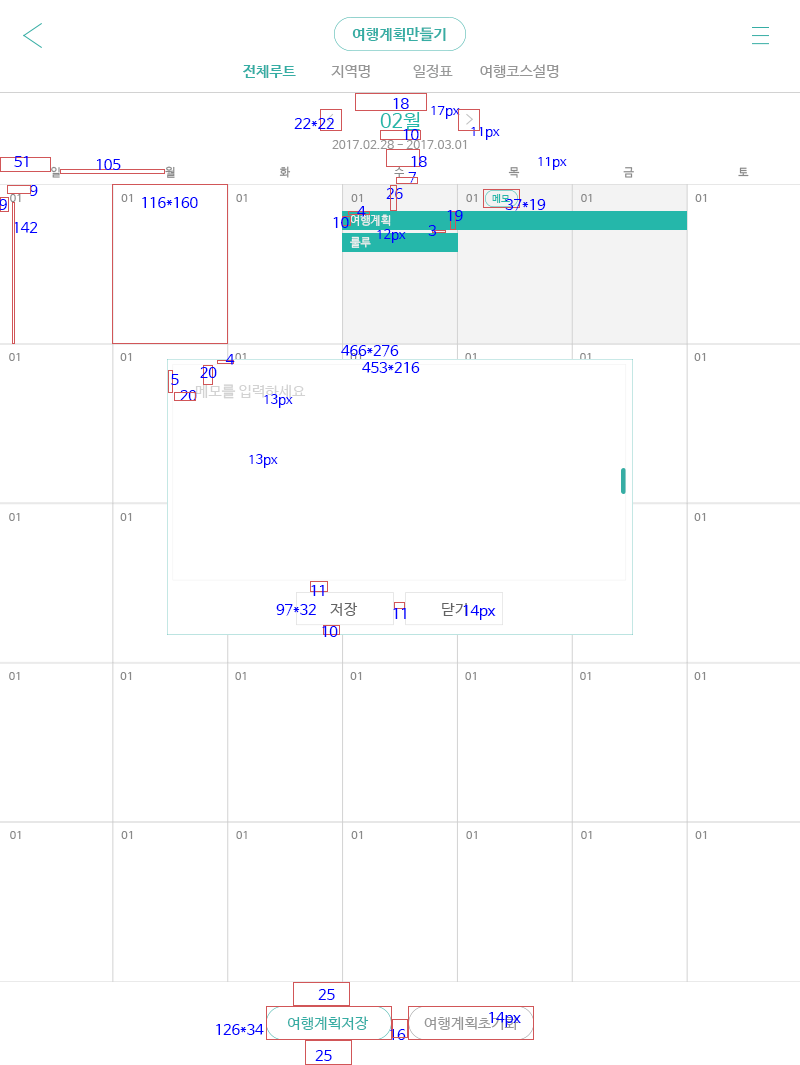
<style>
.page{position:relative;width:800px;height:1065px;background:#ffffff}
.page>*{position:absolute;margin:0}
.t1{font:15px "NanumBarunGothicBold";color:#36ada4}
.t2{font:15px "NanumBarunGothic";color:#959595}
.t3{font:15px "NanumBarunGothic";color:#999a9a}
.t4{font:14.6px "NanumBarunGothic";color:#0000ff}
.t5{font:20px "NanumBarunGothic";color:#25b7aa}
.t6{font:13px "NanumBarunGothic";color:#0000ff}
.t7{font:12px "NanumBarunGothic";color:#959595}
.t8{font:11.4px "NanumBarunGothic";color:#898989}
.t9{font:10px "NanumBarunGothic";color:#25b7aa}
.t10{font:11.4px "NanumBarunGothic";color:#efefef}
.t11{font:11.4px "NanumBarunGothic"}
.t12{font:14.6px "NanumBarunGothic"}
.t13{font:15px "NanumBarunGothic";color:#d2d2d2}
.t14{font:15px "NanumBarunGothic";letter-spacing:0.025em;color:#626262}
.t15{font:15px "NanumBarunGothic";color:#36ada4}
</style>
<div class="page">
<p class="t1" style="left:352px;top:27px;width:94px;height:15px">여행계획만들기</p>
<p class="t1" style="left:243px;top:65px;width:53px;height:13px">전체루트</p>
<p class="t2" style="left:331px;top:65px;width:39px;height:13px">지역명</p>
<p class="t3" style="left:413px;top:64px;width:40px;height:14px">일정표</p>
<p class="t2" style="left:480px;top:64px;width:79px;height:14px">여행코스설명</p>
<p class="t4" style="left:393px;top:98px;width:16px;height:11px">18</p>
<p class="t5" style="left:380px;top:112px;width:40px;height:18px">02월</p>
<p class="t6" style="left:431px;top:106px;width:29px;height:13px">17px</p>
<p class="t4" style="left:294px;top:118px;width:40px;height:11px">22*22</p>
<p class="t4" style="left:403px;top:129px;width:16px;height:11px">10</p>
<p class="t6" style="left:471px;top:127px;width:29px;height:13px">11px</p>
<p class="t7" style="left:332px;top:140px;width:135px;height:9px">2017.02.28 - 2017.03.01</p>
<p class="t4" style="left:14px;top:156px;width:14px;height:11px">51</p>
<p class="t4" style="left:97px;top:159px;width:24px;height:11px">105</p>
<p class="t4" style="left:411px;top:156px;width:16px;height:11px">18</p>
<p class="t6" style="left:538px;top:157px;width:29px;height:13px">11px</p>
<p class="t8" style="left:51px;top:166px;width:9px;height:12px">일</p>
<p class="t8" style="left:165px;top:166px;width:10px;height:12px">월</p>
<p class="t8" style="left:279px;top:166px;width:12px;height:12px">화</p>
<p class="t8" style="left:394px;top:167px;width:10px;height:11px">수</p>
<p class="t4" style="left:408px;top:172px;width:8px;height:12px">7</p>
<p class="t8" style="left:508px;top:167px;width:12px;height:11px">목</p>
<p class="t8" style="left:623px;top:167px;width:11px;height:11px">금</p>
<p class="t8" style="left:738px;top:167px;width:11px;height:10px">토</p>
<p class="t4" style="left:29px;top:185px;width:9px;height:11px">9</p>
<p class="t8" style="left:10px;top:194px;width:11px;height:8px">01</p>
<p class="t8" style="left:121px;top:194px;width:12px;height:8px">01</p>
<p class="t4" style="left:142px;top:197px;width:56px;height:11px">116*160</p>
<p class="t8" style="left:236px;top:194px;width:11px;height:8px">01</p>
<p class="t8" style="left:351px;top:194px;width:12px;height:8px">01</p>
<p class="t4" style="left:386px;top:188px;width:17px;height:11px">26</p>
<p class="t8" style="left:466px;top:194px;width:11px;height:8px">01</p>
<p class="t9" style="left:492px;top:194px;width:18px;height:9px">메모</p>
<p class="t8" style="left:581px;top:194px;width:11px;height:8px">01</p>
<p class="t8" style="left:695px;top:194px;width:12px;height:8px">01</p>
<p class="t4" style="left:0px;top:199px;width:7px;height:11px">9</p>
<p class="t4" style="left:357px;top:206px;width:9px;height:11px">4</p>
<p class="t4" style="left:505px;top:199px;width:41px;height:12px">37*19</p>
<p class="t4" style="left:14px;top:222px;width:24px;height:11px">142</p>
<p class="t4" style="left:333px;top:217px;width:16px;height:11px">10</p>
<p class="t10" style="left:350px;top:214px;width:41px;height:12px">여행계획</p>
<p class="t4" style="left:447px;top:210px;width:16px;height:11px">19</p>
<p class="t6" style="left:377px;top:229px;width:29px;height:14px">12px</p>
<p class="t4" style="left:428px;top:225px;width:9px;height:11px">3</p>
<p class="t10" style="left:350px;top:236px;width:21px;height:12px">룰루</p>
<p class="t8" style="left:9px;top:353px;width:11px;height:8px">01</p>
<p class="t8" style="left:120px;top:353px;width:12px;height:8px">01</p>
<p class="t8" style="left:235px;top:353px;width:11px;height:8px">01</p>
<p class="t4" style="left:341px;top:345px;width:58px;height:12px">466*276</p>
<p class="t11" style="left:350px;top:353px;width:12px;height:8px">01</p>
<p class="t8" style="left:465px;top:353px;width:11px;height:8px">01</p>
<p class="t11" style="left:580px;top:353px;width:11px;height:8px">01</p>
<p class="t8" style="left:694px;top:353px;width:12px;height:8px">01</p>
<p class="t4" style="left:225px;top:354px;width:10px;height:11px">4</p>
<p class="t4" style="left:362px;top:362px;width:58px;height:11px">453*216</p>
<p class="t4" style="left:171px;top:374px;width:8px;height:11px">5</p>
<p class="t4" style="left:200px;top:367px;width:17px;height:11px">20</p>
<p class="t12" style="left:180px;top:390px;width:17px;height:11px">20</p>
<p class="t13" style="left:195px;top:384px;width:111px;height:15px">메모를 입력하세요</p>
<p class="t6" style="left:264px;top:394px;width:29px;height:14px">13px</p>
<p class="t6" style="left:249px;top:454px;width:29px;height:14px">13px</p>
<p class="t8" style="left:9px;top:513px;width:11px;height:8px">01</p>
<p class="t8" style="left:120px;top:513px;width:12px;height:8px">01</p>
<p class="t8" style="left:694px;top:513px;width:12px;height:8px">01</p>
<p class="t4" style="left:311px;top:585px;width:13px;height:11px">11</p>
<p class="t4" style="left:276px;top:604px;width:40px;height:12px">97*32</p>
<p class="t14" style="left:330px;top:602px;width:28px;height:14px">저장</p>
<p class="t14" style="left:442px;top:603px;width:25px;height:13px">닫기</p>
<p class="t4" style="left:463px;top:605px;width:33px;height:15px">14px</p>
<p class="t4" style="left:393px;top:608px;width:13px;height:11px">11</p>
<p class="t4" style="left:322px;top:626px;width:16px;height:11px">10</p>
<p class="t8" style="left:9px;top:672px;width:11px;height:8px">01</p>
<p class="t8" style="left:120px;top:672px;width:12px;height:8px">01</p>
<p class="t8" style="left:235px;top:672px;width:11px;height:8px">01</p>
<p class="t8" style="left:350px;top:672px;width:12px;height:8px">01</p>
<p class="t8" style="left:465px;top:672px;width:11px;height:8px">01</p>
<p class="t8" style="left:580px;top:672px;width:11px;height:8px">01</p>
<p class="t8" style="left:694px;top:672px;width:12px;height:8px">01</p>
<p class="t8" style="left:10px;top:831px;width:11px;height:8px">01</p>
<p class="t8" style="left:121px;top:831px;width:12px;height:8px">01</p>
<p class="t8" style="left:236px;top:831px;width:11px;height:8px">01</p>
<p class="t8" style="left:351px;top:831px;width:12px;height:8px">01</p>
<p class="t8" style="left:466px;top:831px;width:11px;height:8px">01</p>
<p class="t8" style="left:581px;top:831px;width:11px;height:8px">01</p>
<p class="t8" style="left:695px;top:831px;width:12px;height:8px">01</p>
<p class="t4" style="left:318px;top:989px;width:17px;height:11px">25</p>
<p class="t4" style="left:489px;top:1012px;width:32px;height:15px">14px</p>
<p class="t4" style="left:216px;top:1024px;width:48px;height:11px">126*34</p>
<p class="t15" style="left:287px;top:1016px;width:82px;height:14px">여행계획저장</p>
<p class="t2" style="left:424px;top:1016px;width:95px;height:14px">여행계획초기화</p>
<p class="t4" style="left:390px;top:1029px;width:16px;height:11px">16</p>
<p class="t4" style="left:315px;top:1050px;width:17px;height:11px">25</p>
</div>
